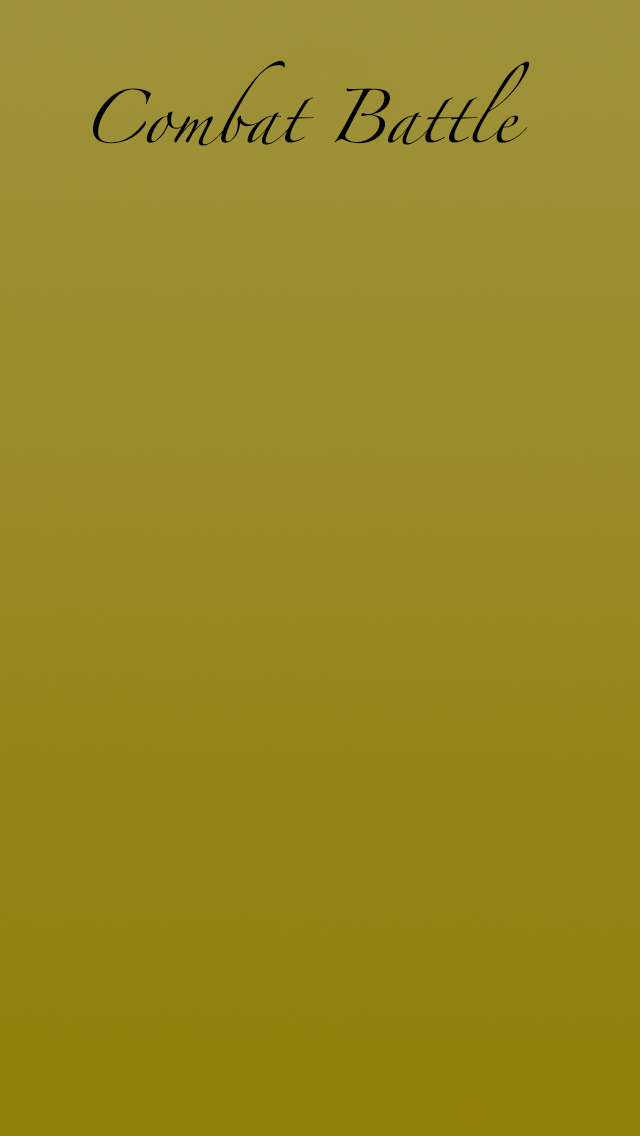
<style>
.page{position:relative;width:640px;height:1136px}
.page>*{position:absolute;margin:0}
.t1{font:48px "Zapfino";color:#000000}
</style>
<div class="page">
<p class="t1" style="left:93px;top:61px;width:437px;height:85px;text-align:center">Combat Battle</p>
</div>
